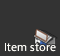
<style>
.page{position:relative;width:60px;height:56px;background:#333333}
.page>*{position:absolute;margin:0}
.t1{font:12px "AdobeClean-Regular";color:#fffef9}
</style>
<div class="page">
<p class="t1" style="left:5px;top:43px;width:51px;height:9px">Item store</p>
</div>
